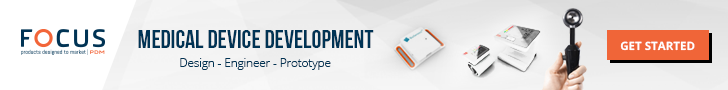
<style>
.page{position:relative;width:728px;height:90px}
.page>*{position:absolute;margin:0}
.t1{font:25px "BebasNeueBold";color:#003354;text-transform:uppercase}
.t2{font:11.6px "OpenSans-Bold";color:#ffffff}
.t3{font:11.5px "OpenSans-Light";color:#003354}
</style>
<div class="page">
<p class="t1" style="left:138px;top:30px;width:236px;height:18px">medical device development</p>
<p class="t2" style="left:620px;top:41px;width:75px;height:10px">GET STARTED</p>
<p class="t3" style="left:180px;top:58px;width:151px;height:12px">Design - Engineer - Prototype</p>
</div>
